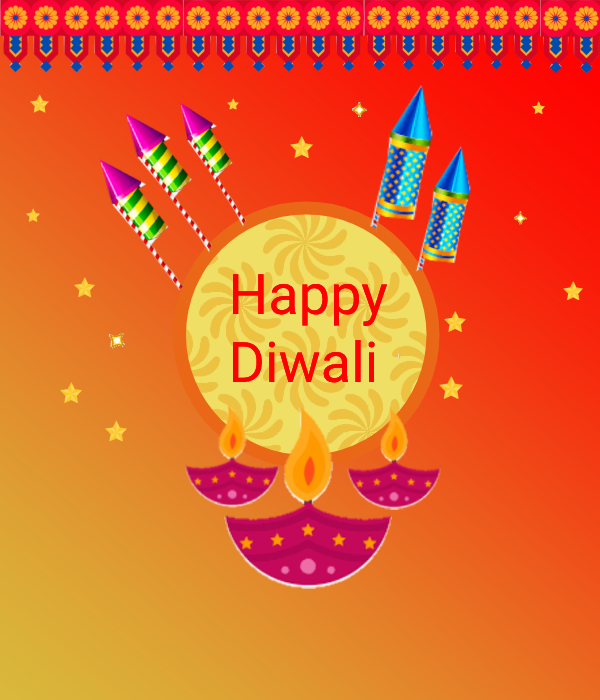
<style>
.page{position:relative;width:600px;height:700px}
.page>*{position:absolute;margin:0}
.t1{font:56px "Roboto-Regular";color:#ff0000}
</style>
<div class="page">
<p class="t1" style="left:232px;top:274px;width:156px;height:109px">Happy <br>Diwali</p>
<p class="t1" style="left:232px;top:274px;width:156px;height:109px">Happy <br>Diwali</p>
</div>
